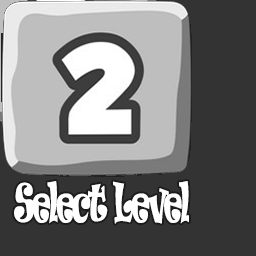
<style>
.page{position:relative;width:256px;height:256px;background:#333333}
.page>*{position:absolute;margin:0}
.t1{font:49px "Ravie";letter-spacing:-0.08em;color:#ffffff;scale:0.5 1}
</style>
<div class="page">
<p class="t1" style="left:14px;top:181px;width:175px;height:43px">Select Level</p>
</div>
